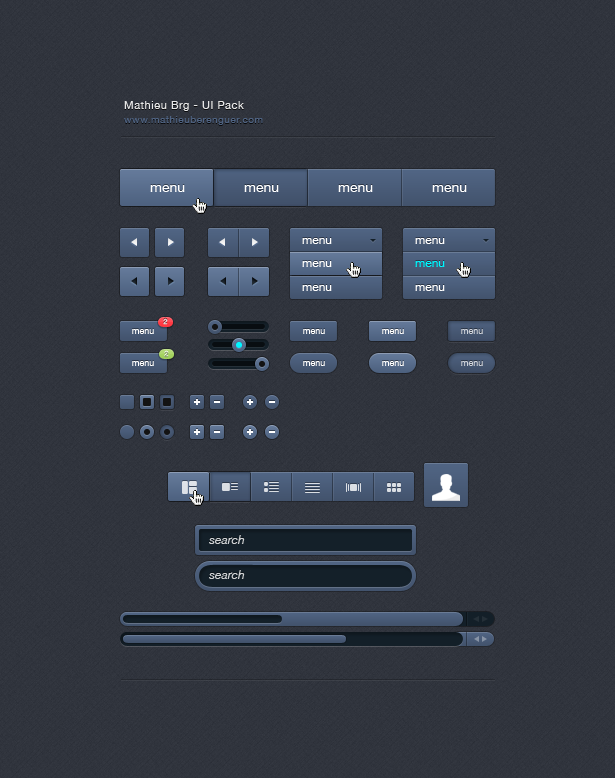
<style>
.page{position:relative;width:615px;height:778px}
.page>*{position:absolute;margin:0}
.t1{font:10px/14px "HelveticaNeue";letter-spacing:0.05em;color:#4f6382}
.t2{font:11px/14px "HelveticaNeue";letter-spacing:0.05em;color:#e7e7e7}
.t3{font:14px "HelveticaNeue";color:#ffffff}
.t4{font:12px "HelveticaNeue";color:#ffffff}
.t5{font:12px "HelveticaNeue";color:#00f7ff}
.t6{font:7px "HelveticaNeue";color:#dfdfdf}
.t7{font:9px "HelveticaNeue";color:#ffffff}
.t8{font:9px "HelveticaNeue";color:#cdd2d9}
.t9{font:7px "HelveticaNeue";color:#8ea071}
.t10{font:12px "HelveticaNeue-Italic";color:#d0d2d4}
</style>
<div class="page">
<p class="t1" style="left:124px;top:101px;width:139px;height:24px"><span class="t2">Mathieu Brg - UI Pack<br></span>www.mathieuberenguer.com</p>
<p class="t3" style="left:150px;top:185px;width:35px;height:7px">menu</p>
<p class="t3" style="left:244px;top:185px;width:35px;height:7px">menu</p>
<p class="t3" style="left:338px;top:185px;width:35px;height:7px">menu</p>
<p class="t3" style="left:432px;top:185px;width:35px;height:7px">menu</p>
<p class="t4" style="left:302px;top:238px;width:30px;height:6px">menu</p>
<p class="t4" style="left:415px;top:238px;width:30px;height:6px">menu</p>
<p class="t4" style="left:302px;top:261px;width:30px;height:6px">menu</p>
<p class="t5" style="left:415px;top:261px;width:30px;height:6px">menu</p>
<p class="t4" style="left:302px;top:285px;width:30px;height:6px">menu</p>
<p class="t4" style="left:415px;top:285px;width:30px;height:6px">menu</p>
<p class="t6" style="left:163px;top:318px;width:5px;height:7px">2</p>
<p class="t7" style="left:132px;top:329px;width:22px;height:5px">menu</p>
<p class="t7" style="left:303px;top:329px;width:22px;height:5px">menu</p>
<p class="t7" style="left:382px;top:329px;width:22px;height:5px">menu</p>
<p class="t8" style="left:461px;top:329px;width:22px;height:5px">menu</p>
<p class="t9" style="left:164px;top:351px;width:5px;height:7px">2</p>
<p class="t7" style="left:132px;top:361px;width:22px;height:5px">menu</p>
<p class="t7" style="left:303px;top:361px;width:22px;height:5px">menu</p>
<p class="t7" style="left:382px;top:361px;width:22px;height:5px">menu</p>
<p class="t8" style="left:461px;top:361px;width:22px;height:5px">menu</p>
<p class="t10" style="left:209px;top:535px;width:36px;height:9px">search</p>
<p class="t10" style="left:209px;top:570px;width:36px;height:9px">search</p>
</div>
